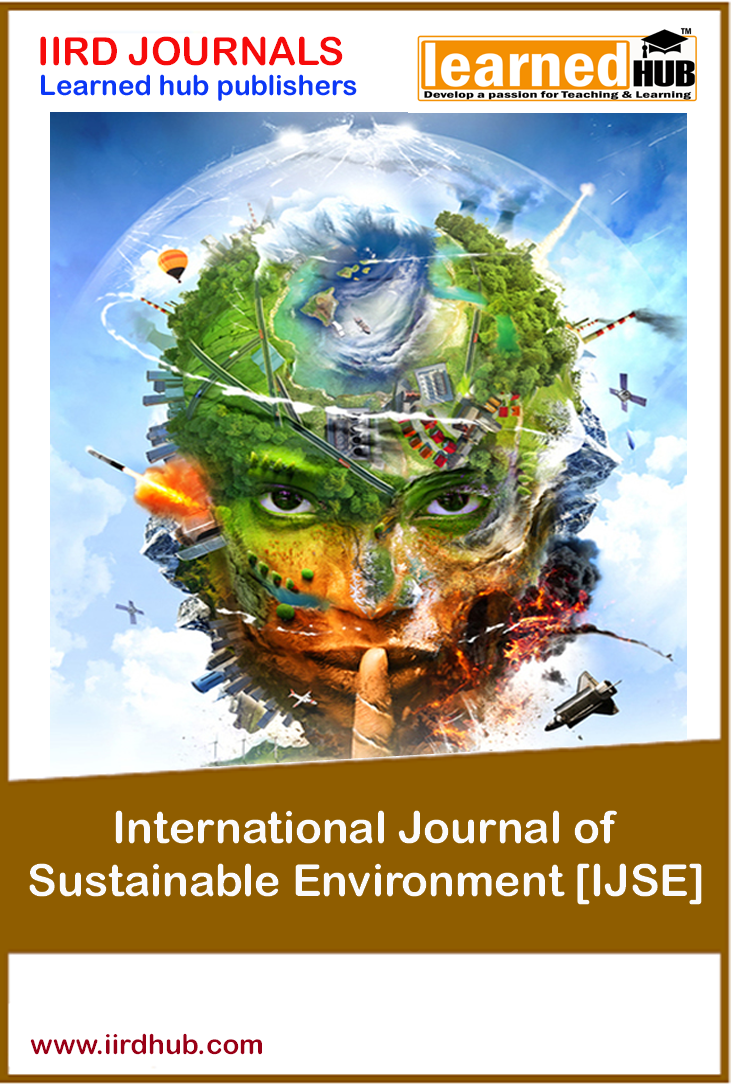
<style>
.page{position:relative;width:731px;height:1085px;background:#ffffff}
.page>*{position:absolute;margin:0}
.t1{font:38.9px "ArialRoundedMTBold";color:#f60b0b}
.t2{font:27.8px "ArialRoundedMTBold";color:#0b37f6}
.t3{font:44.4px "ArialRoundedMTBold";color:#fafafc}
.t4{font:27.8px "ArialRoundedMTBold";color:#990016}
</style>
<div class="page">
<p class="t1" style="left:40px;top:36px;width:303px;height:30px">IIRD JOURNALS</p>
<p class="t2" style="left:41px;top:74px;width:316px;height:27px">Learned hub publishers</p>
<p class="t3" style="left:29px;top:810px;width:673px;height:95px;text-align:center">International Journal of <br>Sustainable Environment [IJSE]</p>
<p class="t4" style="left:30px;top:1033px;width:232px;height:22px">www.iirdhub.com</p>
</div>
